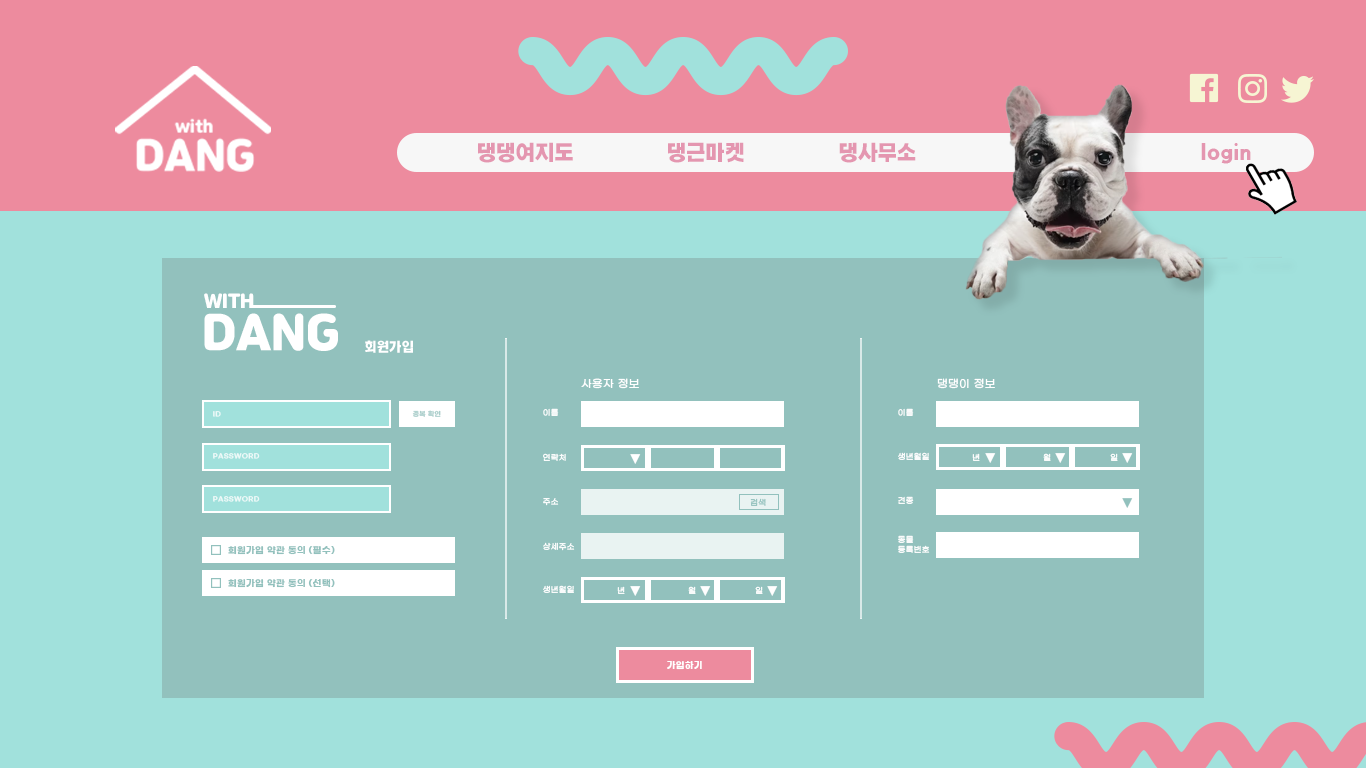
<style>
.page{position:relative;width:1366px;height:768px;background:#92c1bd}
.page>*{position:absolute;margin:0}
.t1{font:19.8px "KOTRA_BOLD-Bold";color:#e496b0}
.t2{font:18.2px/20.5px "JalnanOTF";color:#ffffff}
.t3{font:18.2px/20.5px "JalnanOTF";letter-spacing:-0.13em;color:#ffffff}
.t4{font:45.5px/20.5px "JalnanOTF";color:#ffffff}
.t5{font:12.6px "KOTRA_BOLD-Bold";color:#ffffff}
.t6{font:11px "GmarketSansTTFMedium";letter-spacing:0.04em;color:#ffffff}
.t7{font:6.5px/42.2px "GmarketSansTTFBold";letter-spacing:0.04em;color:#ffffff}
.t8{font:6.5px "GmarketSansTTFBold";letter-spacing:0.04em;color:#abcecb}
.t9{font:8px "GmarketSansTTFMedium";letter-spacing:0.04em;color:#ffffff}
.t10{font:13px "GmarketSansTTFMedium";letter-spacing:0.04em;color:#ffffff}
.t11{font:8px "GmarketSansTTFMedium";letter-spacing:0.04em;color:#92c1bd}
.t12{font:13px "GmarketSansTTFMedium";letter-spacing:0.04em;color:#92c1bd}
.t13{font:8px/10px "GmarketSansTTFMedium";letter-spacing:0.04em;color:#ffffff}
.t14{font:9px "GmarketSansTTFBold";letter-spacing:0.04em;color:#92c1bd}
.t15{font:9px "GmarketSansTTFBold";letter-spacing:0.04em;color:#ffffff}
</style>
<div class="page">
<p class="t1" style="left:478px;top:142px;width:95px;height:21px">댕댕여지도</p>
<p class="t1" style="left:668px;top:142px;width:76px;height:21px">댕근마켓</p>
<p class="t1" style="left:839px;top:142px;width:77px;height:21px">댕사무소</p>
<p class="t1" style="left:1201px;top:143px;width:50px;height:21px">login</p>
<p class="t2" style="left:204px;top:293px;width:134px;height:58px"><span class="t3"> </span>WITH<br><span class="t4">DANG</span></p>
<p class="t5" style="left:365px;top:340px;width:48px;height:13px">회원가입</p>
<p class="t6" style="left:581px;top:378px;width:58px;height:11px">사용자 정보</p>
<p class="t6" style="left:937px;top:378px;width:58px;height:11px">댕댕이 정보</p>
<p class="t7" style="left:213px;top:411px;width:47px;height:91px;opacity:0.8">ID<br>PASSWORD<br>PASSWORD</p>
<p class="t8" style="left:412px;top:410px;width:29px;height:7px">중복 확인</p>
<p class="t9" style="left:543px;top:408px;width:16px;height:8px">이름</p>
<p class="t9" style="left:898px;top:408px;width:16px;height:8px">이름</p>
<p class="t9" style="left:543px;top:453px;width:23px;height:8px">연락처</p>
<p class="t10" style="left:630px;top:454px;width:11px;height:10px">▼</p>
<p class="t9" style="left:898px;top:452px;width:31px;height:8px">생년월일</p>
<p class="t9" style="left:972px;top:453px;width:8px;height:8px">년</p>
<p class="t10" style="left:985px;top:453px;width:11px;height:10px">▼</p>
<p class="t9" style="left:1043px;top:453px;width:8px;height:8px">월</p>
<p class="t10" style="left:1055px;top:453px;width:11px;height:10px">▼</p>
<p class="t9" style="left:1110px;top:453px;width:8px;height:8px">일</p>
<p class="t10" style="left:1122px;top:453px;width:11px;height:10px">▼</p>
<p class="t9" style="left:898px;top:496px;width:16px;height:8px">견종</p>
<p class="t9" style="left:543px;top:498px;width:16px;height:8px">주소</p>
<p class="t11" style="left:750px;top:498px;width:16px;height:8px">검색</p>
<p class="t12" style="left:1122px;top:498px;width:11px;height:10px">▼</p>
<p class="t9" style="left:543px;top:542px;width:32px;height:9px">상세주소</p>
<p class="t13" style="left:898px;top:535px;width:32px;height:18px">동물<br>등록번호</p>
<p class="t14" style="left:228px;top:546px;width:107px;height:9px">회원가입 약관 동의 (필수)</p>
<p class="t14" style="left:228px;top:579px;width:107px;height:9px">회원가입 약관 동의 (선택)</p>
<p class="t9" style="left:543px;top:585px;width:31px;height:8px">생년월일</p>
<p class="t9" style="left:617px;top:586px;width:8px;height:8px">년</p>
<p class="t10" style="left:630px;top:586px;width:11px;height:10px">▼</p>
<p class="t9" style="left:688px;top:586px;width:8px;height:8px">월</p>
<p class="t10" style="left:700px;top:586px;width:11px;height:10px">▼</p>
<p class="t9" style="left:755px;top:586px;width:8px;height:8px">일</p>
<p class="t10" style="left:767px;top:586px;width:11px;height:10px">▼</p>
<p class="t15" style="left:667px;top:661px;width:35px;height:9px">가입하기</p>
</div>
